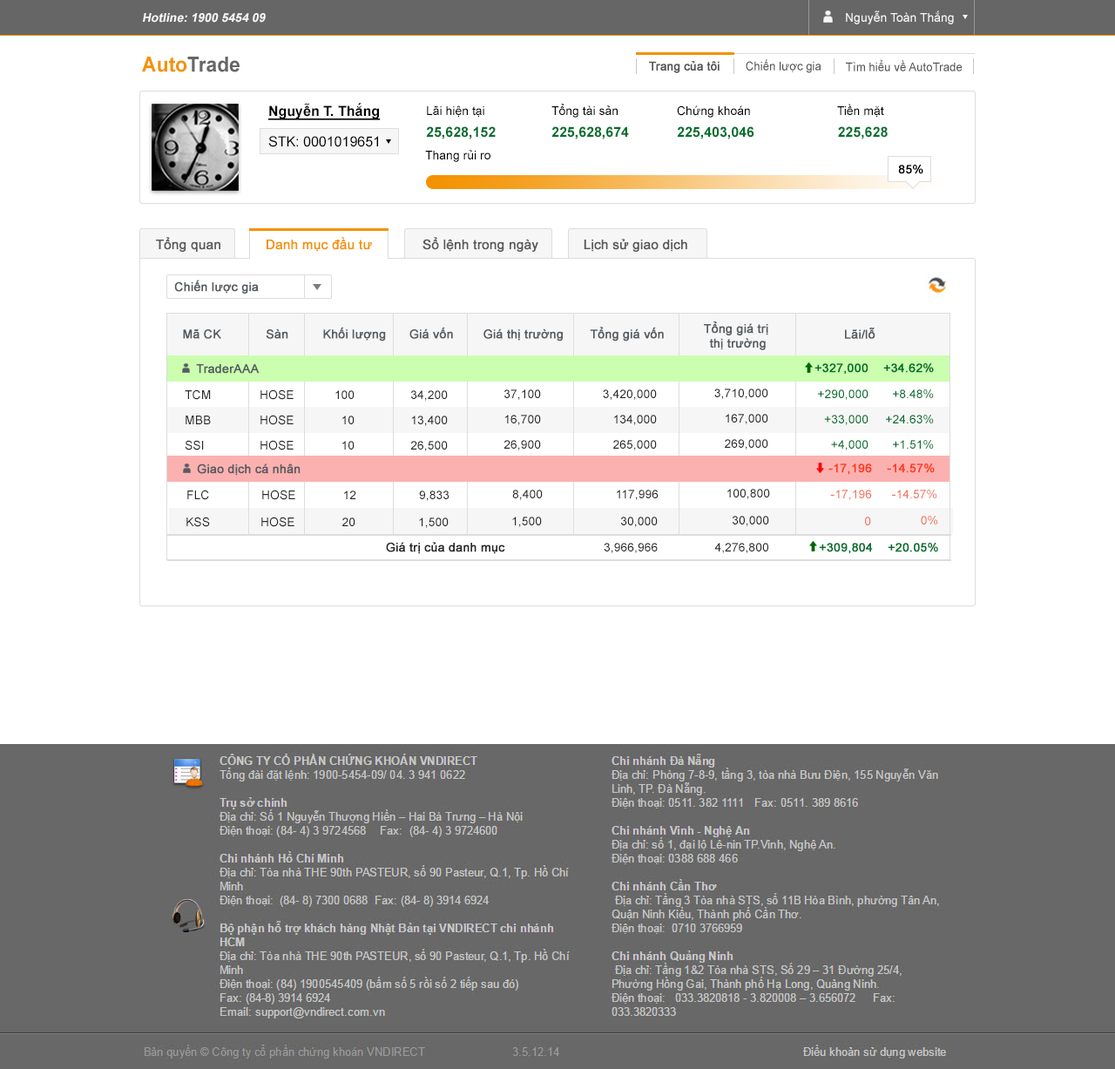
<style>
.page{position:relative;width:1115px;height:1069px;background:#ffffff}
.page>*{position:absolute;margin:0}
.t1{font:12.2px "Arial-BoldMT";color:#f6f6f6;font-style:italic}
.t2{font:12.2px "ArialMT";color:#f6f6f6}
.t3{font:20.9px "Arial-BoldMT";color:#666666;scale:0.95 1}
.t4{font:20.9px "Arial-BoldMT";color:#f39200;scale:0.95 1}
.t5{font:12.2px "ArialMT";color:#535551;font-weight:bold;scale:0.95 1}
.t6{font:12.2px "ArialMT";color:#535551;scale:0.95 1}
.t7{font:13.9px "Arial-BoldMT";color:#000000;text-decoration:underline}
.t8{font:12.2px "ArialMT";color:#000000}
.t9{font:13.9px "ArialMT";color:#000000}
.t10{font:13.9px "Arial-BoldMT";color:#006f2e}
.t11{font:12.2px "ArialMT";color:#000000;font-weight:bold}
.t12{font:13.1px "ArialMT";color:#58595b;font-weight:bold}
.t13{font:13.1px "ArialMT";color:#f39200;font-weight:bold}
.t14{font:12.2px "ArialMT";color:#565c61;font-weight:bold}
.t15{font:12.2px "ArialMT";color:#006f2e;font-weight:bold}
.t16{font:12.2px "ArialMT";color:#292929}
.t17{font:12.2px "ArialMT";color:#006f2e}
.t18{font:12.2px "ArialMT";color:#ff3a1a;font-weight:bold}
.t19{font:12.2px "ArialMT";color:#ef7460}
.t20{font:12.2px "ArialMT";color:#292929;font-weight:bold}
</style>
<div class="page">
<p class="t1" style="left:143px;top:13px;width:123px;height:10px">Hotline: 1900 5454 09</p>
<p class="t2" style="left:846px;top:10px;width:108px;height:14px">Nguyễn Toàn Thắng</p>
<p class="t3" style="left:142px;top:57px;width:98px;height:15px"><span class="t4">Auto</span>Trade</p>
<p class="t5" style="left:649px;top:61px;width:71px;height:12px">Trang của tôi</p>
<p class="t6" style="left:746px;top:59px;width:76px;height:14px">Chiến lược gia</p>
<p class="t6" style="left:846px;top:59px;width:117px;height:12px">Tìm hiểu về AutoTrade</p>
<p class="t7" style="left:268px;top:103px;width:113px;height:17px">Nguyễn T. Thắng</p>
<p class="t8" style="left:427px;top:104px;width:457px;height:14px">Lãi hiện tại   Tổng tài sản  Chứng khoán    Tiền mặt</p>
<p class="t9" style="left:268px;top:136px;width:110px;height:11px">STK: 0001019651</p>
<p class="t10" style="left:426px;top:126px;width:462px;height:13px">25,628,152  225,628,674  225,403,046    225,628</p>
<p class="t8" style="left:425px;top:150px;width:66px;height:12px">Thang rủi ro</p>
<p class="t11" style="left:898px;top:165px;width:26px;height:9px">85%</p>
<p class="t12" style="left:156px;top:237px;width:531px;height:15px">Tổng quan     <span class="t13">Danh mục đầu tư</span>      Sổ lệnh trong ngày      Lịch sử giao dịch</p>
<p class="t14" style="left:174px;top:280px;width:85px;height:14px">Chiến lược gia</p>
<p class="t14" style="left:183px;top:327px;width:481px;height:15px">Mã CK            Sàn     Khối lượng   Giá vốn      Giá thị trường Tổng giá vốn</p>
<p class="t14" style="left:704px;top:322px;width:65px;height:28px;text-align:center">Tổng giá trị <br>thị trường</p>
<p class="t14" style="left:845px;top:328px;width:31px;height:11px">Lãi/lỗ</p>
<p class="t14" style="left:196px;top:364px;width:64px;height:10px">TraderAAA</p>
<p class="t15" style="left:815px;top:363px;width:119px;height:12px">+327,000    +34.62%</p>
<p class="t16" style="left:185px;top:389px;width:26px;height:11px">TCM</p>
<p class="t16" style="left:261px;top:389px;width:33px;height:11px">HOSE</p>
<p class="t16" style="left:505px;top:389px;width:36px;height:11px">37,100</p>
<p class="t16" style="left:603px;top:389px;width:54px;height:11px">3,420,000</p>
<p class="t16" style="left:715px;top:389px;width:54px;height:10px">3,710,000</p>
<p class="t17" style="left:818px;top:389px;width:51px;height:11px">+290,000</p>
<p class="t17" style="left:893px;top:389px;width:41px;height:9px">+8.48%</p>
<p class="t16" style="left:335px;top:390px;width:20px;height:9px">100</p>
<p class="t16" style="left:411px;top:390px;width:37px;height:11px">34,200</p>
<p class="t16" style="left:726px;top:414px;width:43px;height:10px">167,000</p>
<p class="t16" style="left:186px;top:416px;width:25px;height:8px">MBB</p>
<p class="t16" style="left:261px;top:415px;width:33px;height:10px">HOSE</p>
<p class="t16" style="left:342px;top:416px;width:13px;height:8px">10</p>
<p class="t16" style="left:411px;top:416px;width:37px;height:10px">13,400</p>
<p class="t16" style="left:505px;top:415px;width:36px;height:10px">16,700</p>
<p class="t16" style="left:614px;top:415px;width:43px;height:10px">134,000</p>
<p class="t17" style="left:824px;top:415px;width:45px;height:10px">+33,000</p>
<p class="t17" style="left:886px;top:415px;width:48px;height:8px">+24.63%</p>
<p class="t16" style="left:185px;top:440px;width:19px;height:10px">SSI</p>
<p class="t16" style="left:261px;top:440px;width:33px;height:10px">HOSE</p>
<p class="t16" style="left:342px;top:441px;width:13px;height:9px">10</p>
<p class="t16" style="left:410px;top:441px;width:38px;height:10px">26,500</p>
<p class="t16" style="left:504px;top:440px;width:37px;height:10px">26,900</p>
<p class="t16" style="left:613px;top:440px;width:44px;height:10px">265,000</p>
<p class="t16" style="left:725px;top:439px;width:44px;height:11px">269,000</p>
<p class="t17" style="left:831px;top:440px;width:38px;height:10px">+4,000</p>
<p class="t17" style="left:893px;top:440px;width:41px;height:9px">+1.51%</p>
<p class="t14" style="left:197px;top:464px;width:104px;height:12px">Giao dịch cá nhân</p>
<p class="t18" style="left:829px;top:464px;width:106px;height:11px">-17,196    -14.57%</p>
<p class="t16" style="left:187px;top:490px;width:22px;height:10px">FLC</p>
<p class="t16" style="left:262px;top:490px;width:33px;height:10px">HOSE</p>
<p class="t16" style="left:344px;top:491px;width:12px;height:8px">12</p>
<p class="t16" style="left:419px;top:491px;width:31px;height:10px">9,833</p>
<p class="t16" style="left:512px;top:490px;width:31px;height:10px">8,400</p>
<p class="t16" style="left:617px;top:490px;width:42px;height:10px">117,996</p>
<p class="t16" style="left:728px;top:489px;width:42px;height:10px">100,800</p>
<p class="t19" style="left:830px;top:490px;width:42px;height:10px">-17,196</p>
<p class="t19" style="left:892px;top:490px;width:46px;height:8px">-14.57%</p>
<p class="t16" style="left:186px;top:517px;width:24px;height:10px">KSS</p>
<p class="t16" style="left:261px;top:517px;width:34px;height:10px">HOSE</p>
<p class="t16" style="left:342px;top:518px;width:14px;height:8px">20</p>
<p class="t16" style="left:419px;top:518px;width:30px;height:10px">1,500</p>
<p class="t16" style="left:512px;top:517px;width:30px;height:10px">1,500</p>
<p class="t16" style="left:621px;top:517px;width:37px;height:10px">30,000</p>
<p class="t16" style="left:733px;top:516px;width:36px;height:10px">30,000</p>
<p class="t19" style="left:865px;top:517px;width:6px;height:8px">0</p>
<p class="t19" style="left:921px;top:516px;width:17px;height:9px">0%</p>
<p class="t20" style="left:386px;top:542px;width:119px;height:12px">Giá trị của danh mục</p>
<p class="t16" style="left:604px;top:543px;width:334px;height:11px">3,966,966       4,276,800         <span class="t15">+309,804    +20.05%</span></p>
</div>
